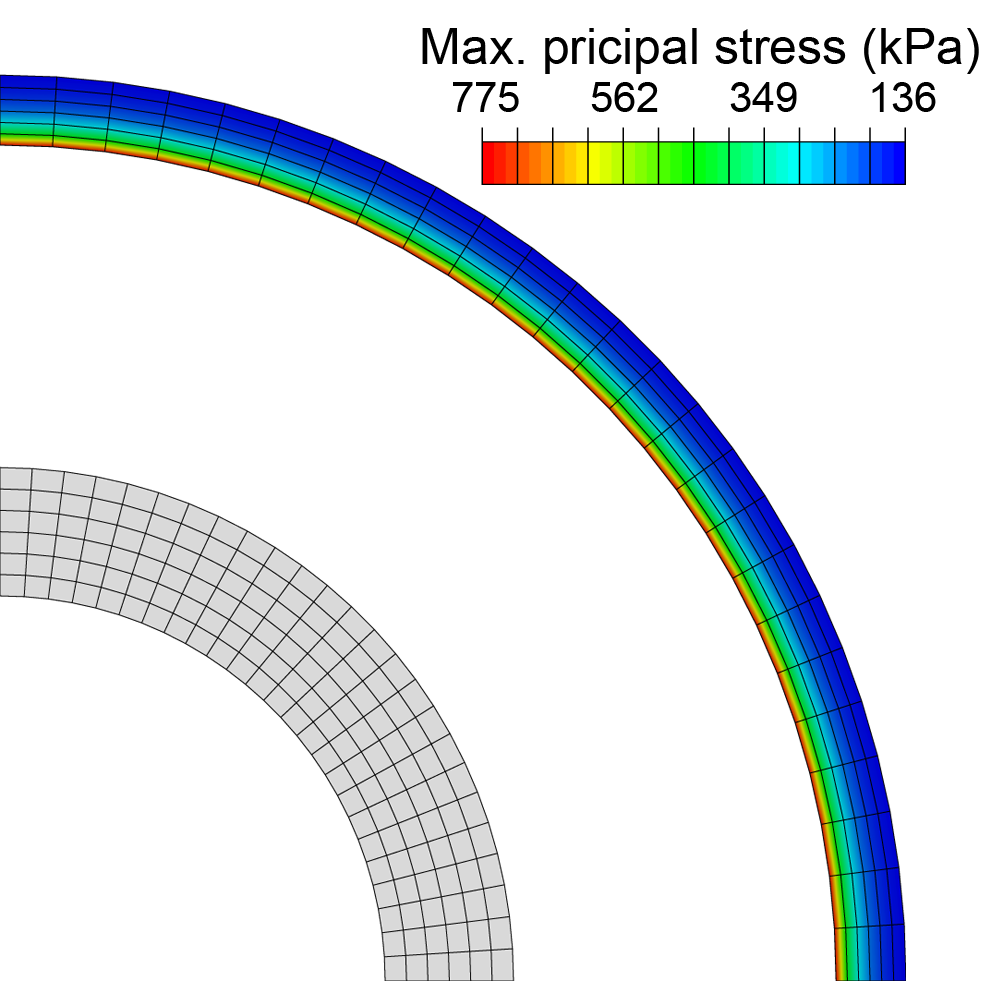
<style>
.page{position:relative;width:981px;height:981px;background:#ffffff}
.page>*{position:absolute;margin:0}
.t1{font:50px "ArialMT";color:#000000}
.t2{font:41.7px "ArialMT";color:#000000}
</style>
<div class="page">
<p class="t1" style="left:422px;top:28px;width:557px;height:46px">Max. pricipal stress (kPa)</p>
<p class="t2" style="left:453px;top:82px;width:483px;height:30px">775      562      349      136</p>
</div>
